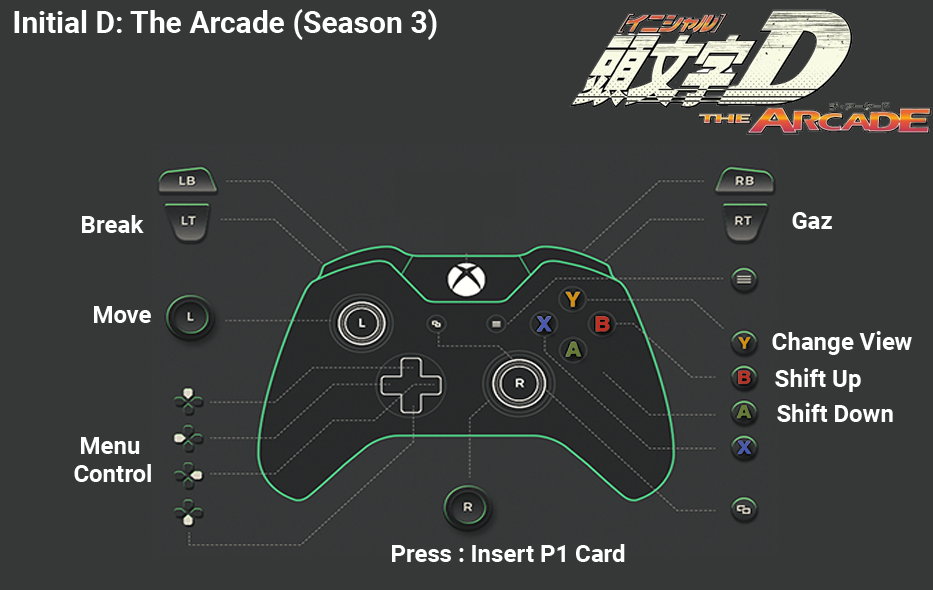
<style>
.page{position:relative;width:933px;height:590px;background:#363838}
.page>*{position:absolute;margin:0}
.t1{font:30px "Roboto-Bold";color:#ffffff}
.t2{font:24px "Roboto-Bold";color:#ffffff}
.t3{font:24px/28px "Roboto-Bold";color:#ffffff}
</style>
<div class="page">
<p class="t1" style="left:14px;top:9px;width:423px;height:31px">Initial D: The Arcade (Season 3)</p>
<p class="t2" style="left:82px;top:215px;width:62px;height:18px">Break</p>
<p class="t2" style="left:792px;top:212px;width:40px;height:17px">Gaz</p>
<p class="t2" style="left:94px;top:306px;width:57px;height:17px">Move</p>
<p class="t2" style="left:772px;top:331px;width:140px;height:24px">Change View</p>
<p class="t2" style="left:775px;top:368px;width:86px;height:24px">Shift Up</p>
<p class="t2" style="left:777px;top:403px;width:116px;height:19px">Shift Down</p>
<p class="t3" style="left:74px;top:437px;width:77px;height:45px;text-align:center">Menu <br>Control</p>
<p class="t2" style="left:392px;top:544px;width:233px;height:18px">Press : Insert P1 Card</p>
</div>
